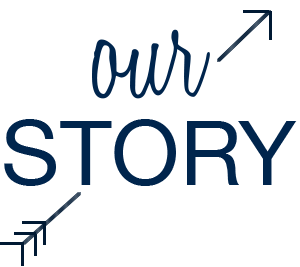
<style>
.page{position:relative;width:300px;height:267px;background:#ffffff}
.page>*{position:absolute;margin:0}
.t1{font:150px "HoneyScript-Light";color:#00254d}
.t2{font:90px "HelveticaNeue";color:#00254d}
</style>
<div class="page">
<p class="t1" style="left:92px;top:29px;width:118px;height:70px">our</p>
<p class="t2" style="left:4px;top:119px;width:293px;height:67px">STORY</p>
</div>
